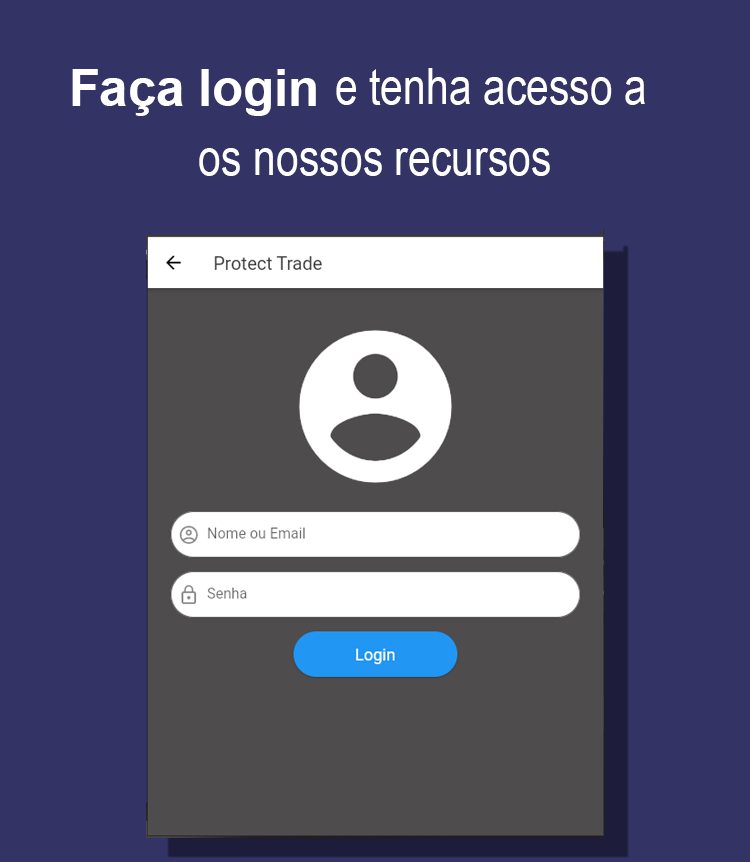
<style>
.page{position:relative;width:750px;height:862px;background:#333366}
.page>*{position:absolute;margin:0}
.t1{font:50.6px "Arial-BoldMT";color:#ffffff}
.t2{font:50px "ArialNarrow";color:#ffffff}
</style>
<div class="page">
<p class="t1" style="left:72px;top:69px;width:244px;height:47px">Faça login</p>
<p class="t2" style="left:336px;top:68px;width:309px;height:37px">e tenha acesso a</p>
<p class="t2" style="left:199px;top:148px;width:351px;height:28px">os nossos recursos</p>
</div>
